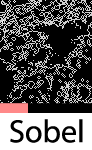
<style>
.page{position:relative;width:92px;height:150px;background:#000000}
.page>*{position:absolute;margin:0}
.t1{font:32.3px "MyriadPro-Regular";color:#000000}
</style>
<div class="page">
<p class="t1" style="left:10px;top:119px;width:73px;height:24px">Sobel</p>
</div>
